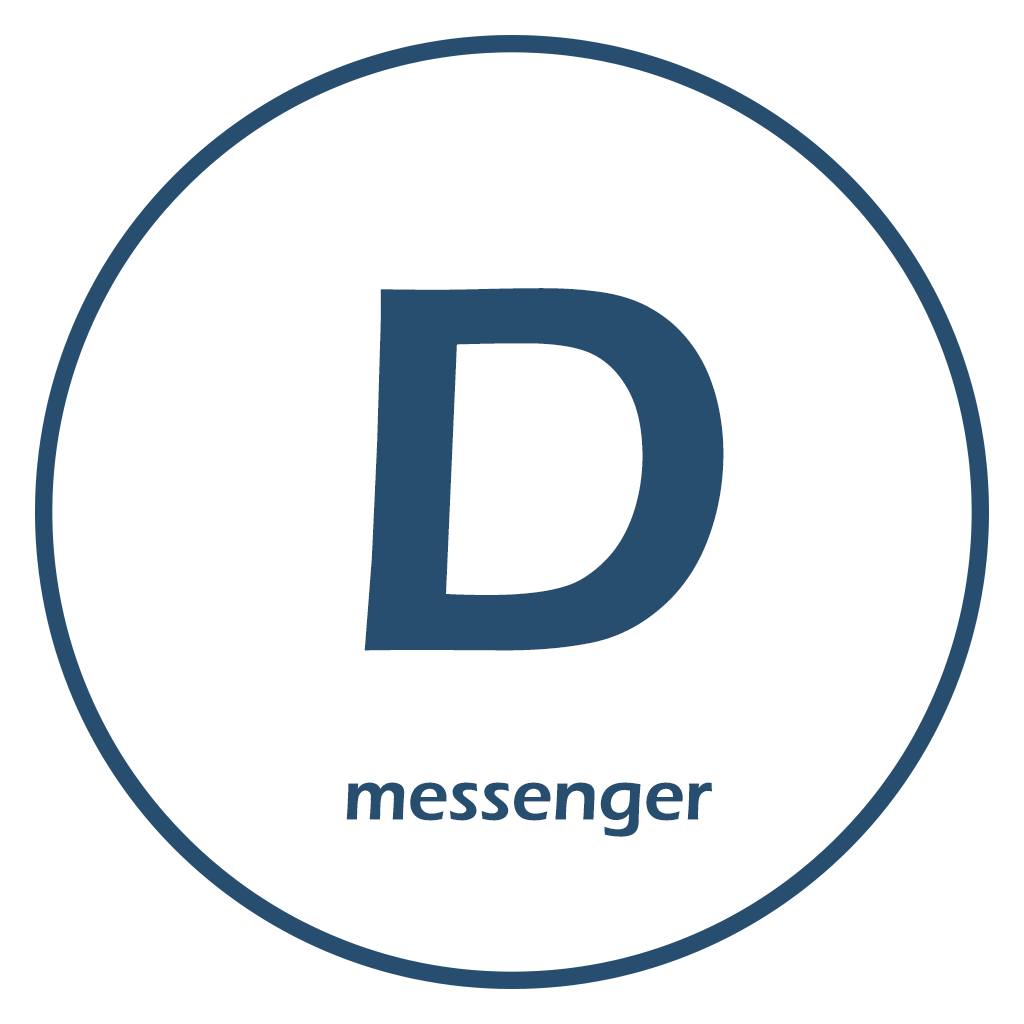
<style>
.page{position:relative;width:1024px;height:1024px;background:#ffffff}
.page>*{position:absolute;margin:0}
.t1{font:541.7px "ErasITC-Demi";color:#274e6f}
.t2{font:72.2px "ErasITC-Demi";color:#274e6f}
</style>
<div class="page">
<p class="t1" style="left:364px;top:288px;width:360px;height:363px">D</p>
<p class="t2" style="left:346px;top:782px;width:366px;height:55px">messenger</p>
</div>
